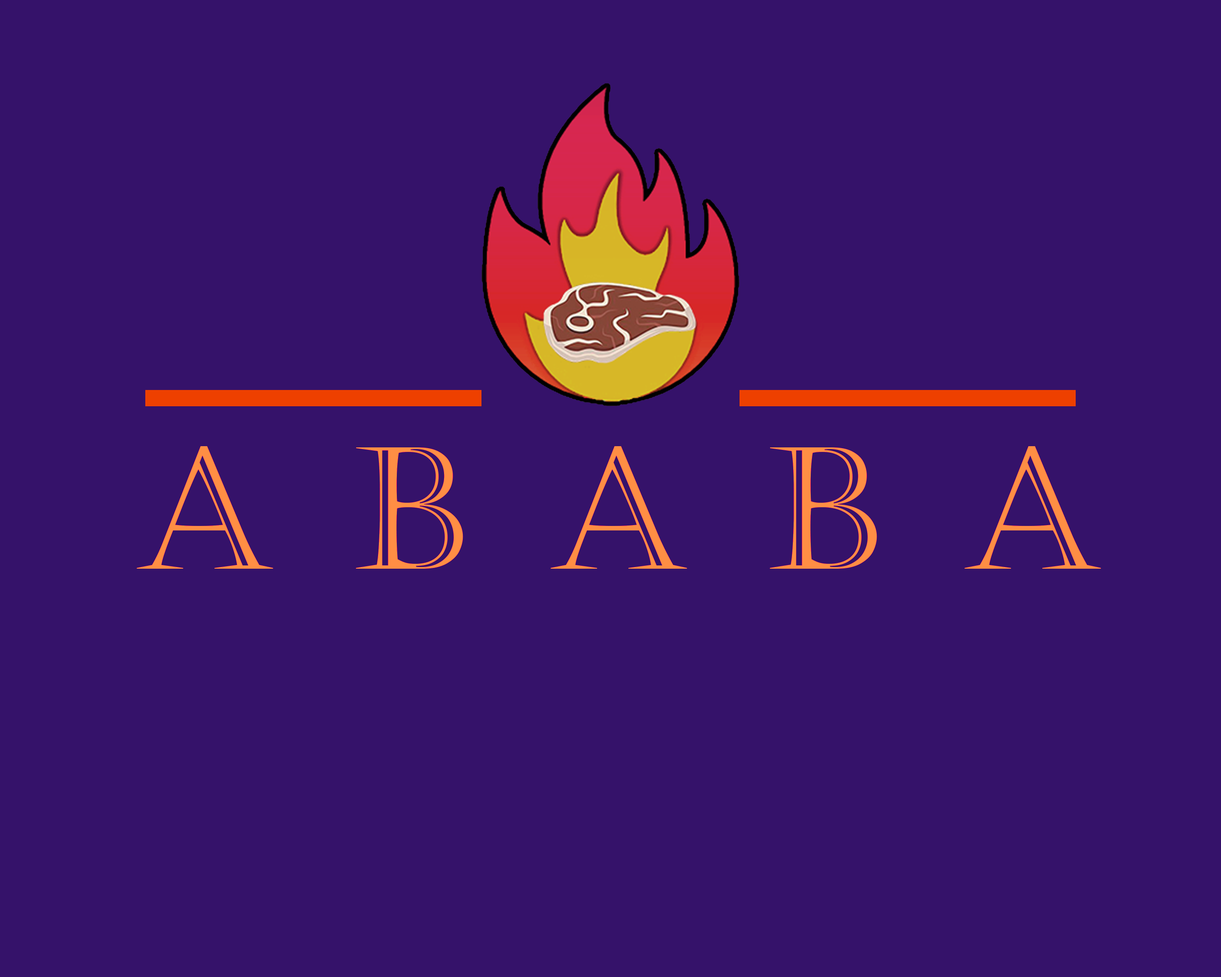
<style>
.page{position:relative;width:1221px;height:977px;background:#35126a}
.page>*{position:absolute;margin:0}
.t1{font:169.6px "Castellar";letter-spacing:0.48em;color:#ff8e44}
</style>
<div class="page">
<p class="t1" style="left:137px;top:446px;width:964px;height:123px">ababa</p>
</div>
